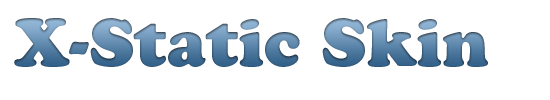
<style>
.page{position:relative;width:550px;height:100px;background:#ffffff}
.page>*{position:absolute;margin:0}
.t1{font:66.4px "CooperBlackStd"}
</style>
<div class="page">
<p class="t1" style="left:14px;top:18px;width:474px;height:49px">X-Static Skin</p>
</div>
